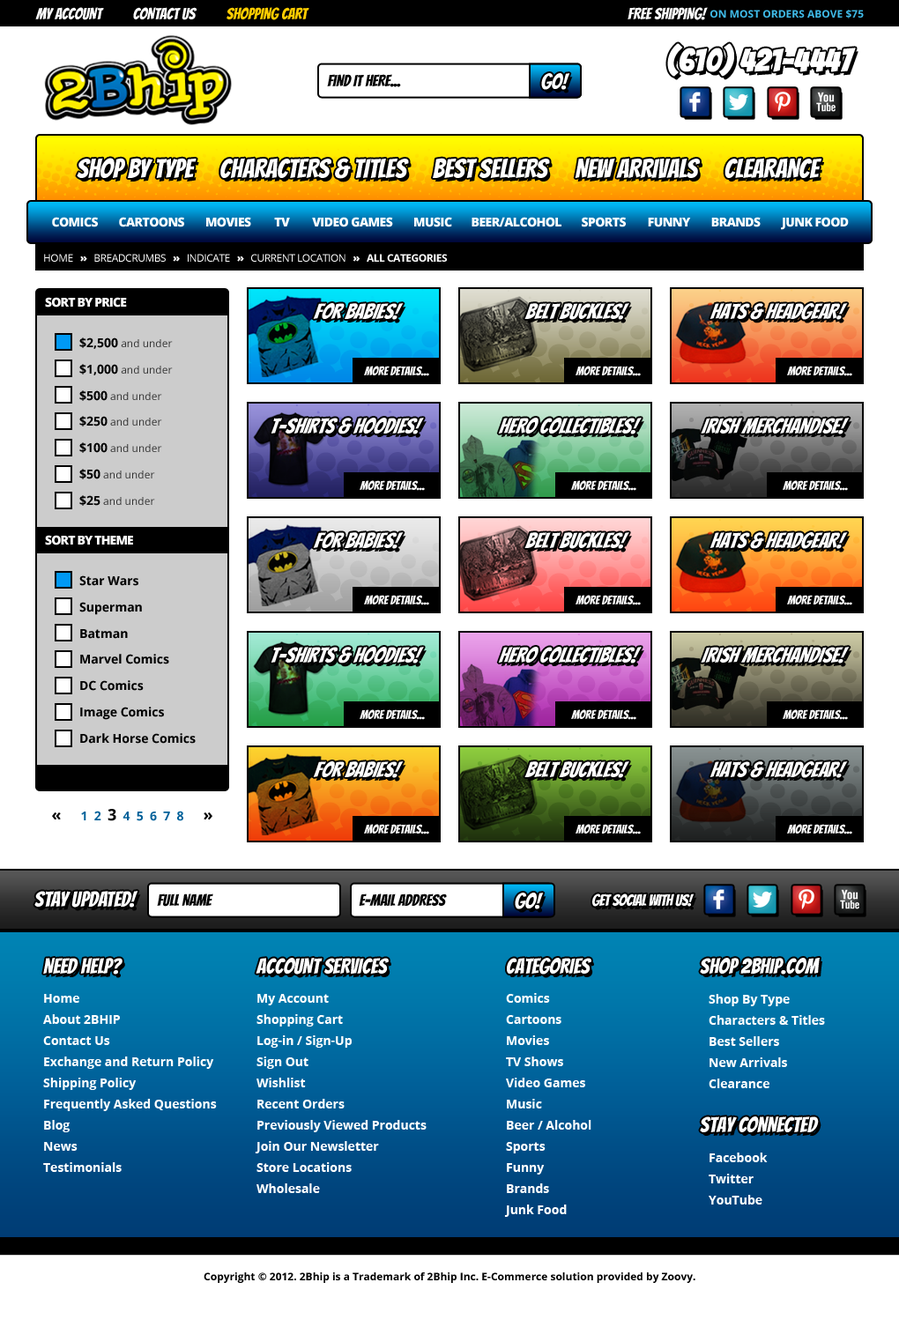
<style>
.page{position:relative;width:899px;height:1327px;background:#ffffff}
.page>*{position:absolute;margin:0}
.t1{font:15.9px "Bangers-Regular";color:#ffffff}
.t2{font:15.9px "Bangers-Regular";color:#ffcc00}
.t3{font:10.6px "OpenSans-Bold";color:#3fbae7}
.t4{font:31.7px "Bangers-Regular";color:#ffffff;font-weight:bold}
.t5{font:15.9px "Bangers-Regular";color:#000000}
.t6{font:21.1px "Bangers-Regular";color:#ffffff}
.t7{font:26.4px "Bangers-Regular";color:#ffffff}
.t8{font:12.3px "OpenSans-Extrabold";letter-spacing:-0.04em;color:#ffffff}
.t9{font:10.6px "OpenSans";letter-spacing:-0.04em;color:#ffffff}
.t10{font:10.6px "OpenSans-Extrabold";letter-spacing:-0.04em;color:#ffffff}
.t11{font:10.6px "OpenSans-Bold";letter-spacing:-0.04em;color:#ffffff}
.t12{font:12.3px "OpenSans-Extrabold";letter-spacing:-0.06em;color:#ffffff}
.t13{font:21.1px "Bangers-Regular";color:#ffffff;font-style:italic}
.t14{font:10.6px/26.2px "OpenSans";color:#333333}
.t15{font:12.3px/26.2px "OpenSans-Bold";color:#000000}
.t16{font:12.3px "Bangers-Regular";color:#ffffff}
.t17{font:12.3px "OpenSans-Bold";color:#006099}
.t18{font:15.9px "OpenSans-Bold";color:#000000}
.t19{font:15.9px "Bangers-Regular";letter-spacing:-0.025em;color:#ffffff}
.t20{font:12.3px/21.1px "OpenSans-Bold";color:#ffffff}
.t21{font:10.6px "OpenSans-Bold";color:#000000}
</style>
<div class="page">
<p class="t1" style="left:35px;top:7px;width:274px;height:13px">MY ACCOUNT          CONTACT US          <span class="t2">SHOPPING CART</span></p>
<p class="t3" style="left:627px;top:7px;width:236px;height:13px"><span class="t1">FREE SHIPPING! </span>ON MOST ORDERS ABOVE $75</p>
<p class="t4" style="left:667px;top:43px;width:189px;height:34px">(610) 421-4447</p>
<p class="t5" style="left:327px;top:74px;width:74px;height:13px">FIND IT HERE...</p>
<p class="t6" style="left:541px;top:73px;width:29px;height:17px">GO!</p>
<p class="t7" style="left:77px;top:158px;width:119px;height:20px">SHOP BY TYPE</p>
<p class="t7" style="left:220px;top:158px;width:189px;height:21px">CHARACTERS &amp; TITLES</p>
<p class="t7" style="left:433px;top:158px;width:117px;height:20px">BEST SELLERS</p>
<p class="t7" style="left:574px;top:158px;width:126px;height:21px">NEW ARRIVALS</p>
<p class="t7" style="left:724px;top:158px;width:97px;height:20px">CLEARANCE</p>
<p class="t8" style="left:52px;top:217px;width:46px;height:10px">COMICS</p>
<p class="t8" style="left:119px;top:217px;width:65px;height:10px">CARTOONS</p>
<p class="t8" style="left:206px;top:217px;width:45px;height:10px">MOVIES</p>
<p class="t8" style="left:274px;top:218px;width:16px;height:8px">TV</p>
<p class="t8" style="left:312px;top:217px;width:81px;height:10px">VIDEO GAMES</p>
<p class="t8" style="left:414px;top:217px;width:38px;height:10px">MUSIC</p>
<p class="t8" style="left:471px;top:217px;width:90px;height:10px">BEER/ALCOHOL</p>
<p class="t8" style="left:581px;top:217px;width:45px;height:10px">SPORTS</p>
<p class="t8" style="left:648px;top:218px;width:43px;height:9px">FUNNY</p>
<p class="t8" style="left:711px;top:217px;width:49px;height:10px">BRANDS</p>
<p class="t8" style="left:781px;top:217px;width:67px;height:13px">JUNK FOOD</p>
<p class="t9" style="left:44px;top:254px;width:403px;height:8px">HOME   <span class="t10">»</span>   BREADCRUMBS   <span class="t10">»</span>   INDICATE   <span class="t10">»</span>   CURRENT LOCATION   <span class="t10">»   </span><span class="t11">ALL CATEGORIES</span></p>
<p class="t12" style="left:45px;top:297px;width:82px;height:10px">SORT BY PRICE</p>
<p class="t13" style="left:313px;top:303px;width:91px;height:17px">FOR Babies!</p>
<p class="t13" style="left:524px;top:303px;width:105px;height:17px">BELT BUCKLES!</p>
<p class="t13" style="left:709px;top:303px;width:139px;height:17px">HATS &amp; HEADGEAR!</p>
<p class="t14" style="left:79px;top:337px;width:94px;height:169px"><span class="t15">$2,500</span> and under<br><span class="t15">$1,000</span> and under<br><span class="t15">$500</span> and under<br><span class="t15">$250</span> and under<br><span class="t15">$100</span> and under<br><span class="t15">$50</span> and under<br><span class="t15">$25</span> and under</p>
<p class="t16" style="left:364px;top:366px;width:65px;height:10px">MORE DETAILS...</p>
<p class="t16" style="left:575px;top:366px;width:66px;height:10px">MORE DETAILS...</p>
<p class="t16" style="left:787px;top:366px;width:65px;height:10px">MORE DETAILS...</p>
<p class="t13" style="left:270px;top:418px;width:154px;height:16px">T-SHIRTS &amp; HOODIES!</p>
<p class="t13" style="left:498px;top:418px;width:143px;height:16px">HERO COLLECTIBLES!</p>
<p class="t13" style="left:700px;top:418px;width:149px;height:16px">IRISH MERCHANDISE!</p>
<p class="t16" style="left:359px;top:480px;width:66px;height:11px">MORE DETAILS...</p>
<p class="t16" style="left:571px;top:480px;width:65px;height:11px">MORE DETAILS...</p>
<p class="t16" style="left:782px;top:480px;width:66px;height:11px">MORE DETAILS...</p>
<p class="t13" style="left:313px;top:532px;width:91px;height:17px">FOR Babies!</p>
<p class="t13" style="left:524px;top:532px;width:105px;height:17px">BELT BUCKLES!</p>
<p class="t13" style="left:709px;top:532px;width:139px;height:17px">HATS &amp; HEADGEAR!</p>
<p class="t12" style="left:45px;top:535px;width:88px;height:10px">SORT BY THEME</p>
<p class="t15" style="left:79px;top:575px;width:117px;height:169px">Star Wars<br>Superman<br>Batman<br>Marvel Comics<br>DC Comics<br>Image Comics<br>Dark Horse Comics</p>
<p class="t16" style="left:364px;top:595px;width:65px;height:10px">MORE DETAILS...</p>
<p class="t16" style="left:575px;top:595px;width:66px;height:10px">MORE DETAILS...</p>
<p class="t16" style="left:787px;top:595px;width:65px;height:10px">MORE DETAILS...</p>
<p class="t13" style="left:270px;top:647px;width:154px;height:16px">T-SHIRTS &amp; HOODIES!</p>
<p class="t13" style="left:498px;top:647px;width:143px;height:16px">HERO COLLECTIBLES!</p>
<p class="t13" style="left:700px;top:647px;width:149px;height:16px">IRISH MERCHANDISE!</p>
<p class="t16" style="left:359px;top:709px;width:66px;height:11px">MORE DETAILS...</p>
<p class="t16" style="left:571px;top:709px;width:65px;height:11px">MORE DETAILS...</p>
<p class="t16" style="left:782px;top:709px;width:66px;height:11px">MORE DETAILS...</p>
<p class="t13" style="left:313px;top:761px;width:91px;height:17px">FOR Babies!</p>
<p class="t13" style="left:524px;top:761px;width:105px;height:17px">BELT BUCKLES!</p>
<p class="t13" style="left:709px;top:761px;width:139px;height:17px">HATS &amp; HEADGEAR!</p>
<p class="t17" style="left:52px;top:809px;width:160px;height:12px"><span class="t18">«      </span>1  2  <span class="t18">3</span>  4  5  6  7  8      <span class="t18">»</span></p>
<p class="t16" style="left:364px;top:824px;width:65px;height:10px">MORE DETAILS...</p>
<p class="t16" style="left:575px;top:824px;width:66px;height:10px">MORE DETAILS...</p>
<p class="t16" style="left:787px;top:824px;width:65px;height:10px">MORE DETAILS...</p>
<p class="t6" style="left:34px;top:891px;width:104px;height:16px">STAY UPDATED!</p>
<p class="t5" style="left:157px;top:893px;width:56px;height:14px">FULL NAME</p>
<p class="t5" style="left:359px;top:893px;width:88px;height:13px">E-MAIL ADDRESS</p>
<p class="t6" style="left:515px;top:893px;width:29px;height:16px">GO!</p>
<p class="t19" style="left:592px;top:893px;width:102px;height:14px">GET SOCIAL WITH US!</p>
<p class="t6" style="left:43px;top:958px;width:79px;height:16px">NEED HELP?</p>
<p class="t6" style="left:256px;top:958px;width:133px;height:16px">ACCOUNT SERVICES</p>
<p class="t6" style="left:507px;top:958px;width:84px;height:16px">CATEGORIES</p>
<p class="t6" style="left:700px;top:958px;width:119px;height:16px">SHOP 2BHIP.COM</p>
<p class="t20" style="left:43px;top:994px;width:174px;height:178px">Home<br>About 2BHIP<br>Contact Us<br>Exchange and Return Policy<br>Shipping Policy<br>Frequently Asked Questions<br>Blog<br>News<br>Testimonials</p>
<p class="t20" style="left:255px;top:994px;width:171px;height:199px">My Account<br>Shopping Cart<br>Log-in / Sign-Up<br>Sign Out<br>Wishlist<br>Recent Orders<br>Previously Viewed Products<br>Join Our Newsletter<br>Store Locations<br>Wholesale</p>
<p class="t20" style="left:504px;top:993px;width:87px;height:224px">Comics<br>Cartoons<br>Movies<br>TV Shows<br>Video Games<br>Music<br>Beer / Alcohol<br>Sports<br>Funny<br>Brands<br>Junk Food</p>
<p class="t20" style="left:708px;top:994px;width:117px;height:94px">Shop By Type<br>Characters &amp; Titles<br>Best Sellers<br>New Arrivals<br>Clearance</p>
<p class="t6" style="left:700px;top:1116px;width:119px;height:16px">STAY CONNECTED</p>
<p class="t20" style="left:708px;top:1152px;width:59px;height:52px">Facebook<br>Twitter<br>YouTube</p>
<p class="t21" style="left:204px;top:1272px;width:491px;height:11px">Copyright © 2012. 2Bhip is a Trademark of 2Bhip Inc. E-Commerce solution provided by Zoovy.</p>
</div>
